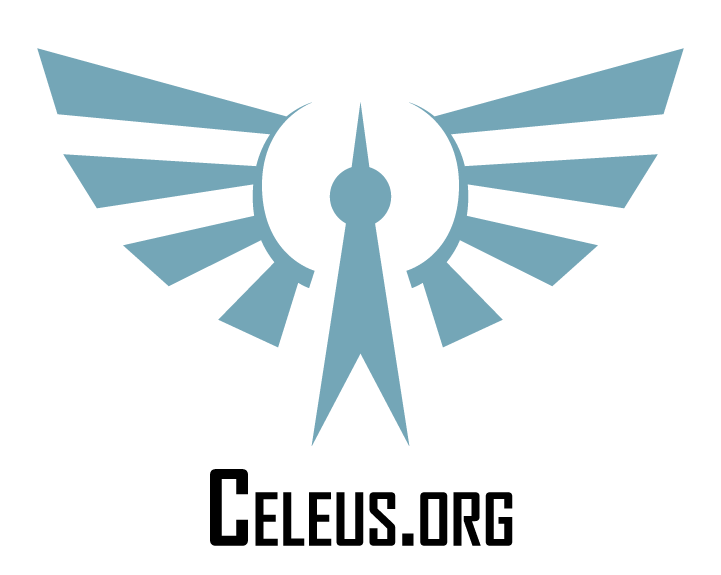
<style>
.page{position:relative;width:721px;height:575px;background:#ffffff}
.page>*{position:absolute;margin:0}
.t1{font:100px "AgencyFB-Bold";color:#000000;font-variant:small-caps}
</style>
<div class="page">
<p class="t1" style="left:210px;top:469px;width:303px;height:77px">Celeus.org</p>
</div>
